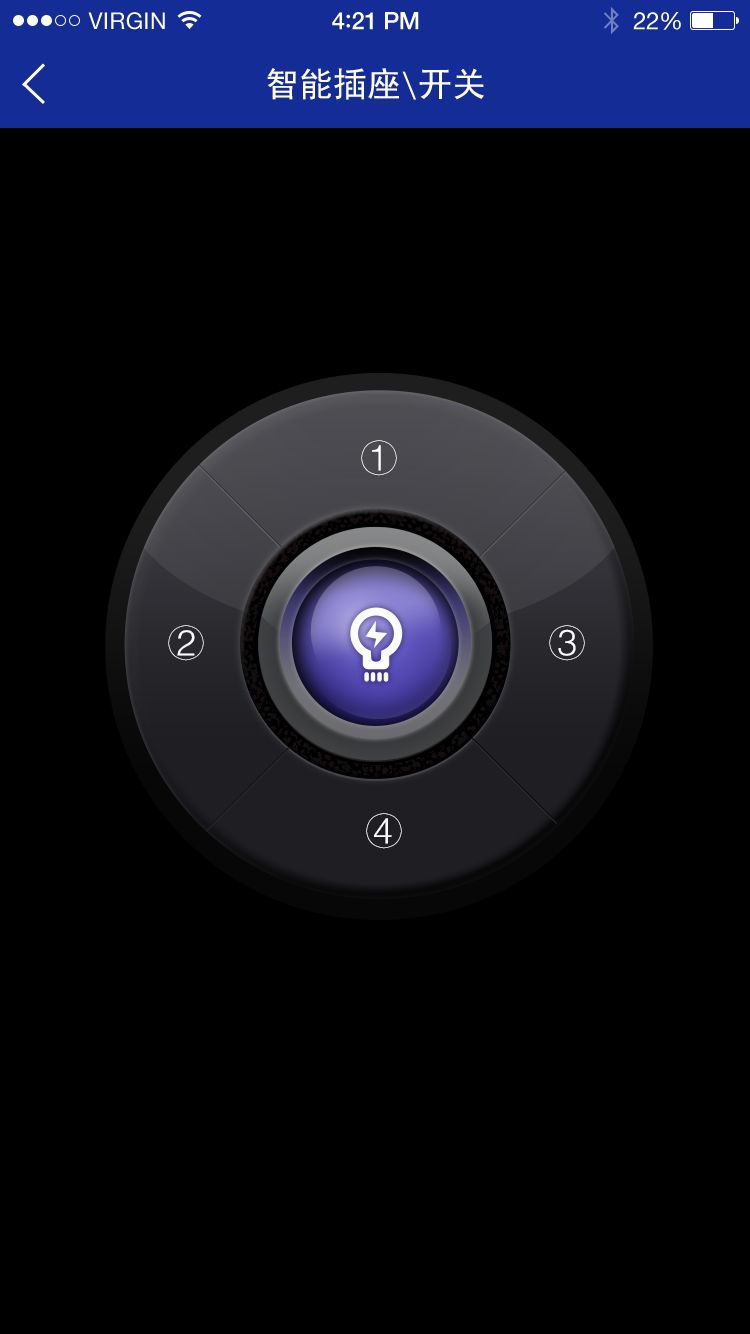
<style>
.page{position:relative;width:750px;height:1334px;background:#000000}
.page>*{position:absolute;margin:0}
.t1{font:34px "SimHei";color:#fefefe}
.t2{font:36px "FZY3JW--GB1-0";color:#ffffff}
</style>
<div class="page">
<p class="t1" style="left:267px;top:68px;width:217px;height:32px">智能插座\开关</p>
<p class="t2" style="left:361px;top:440px;width:36px;height:36px">①</p>
<p class="t2" style="left:168px;top:625px;width:36px;height:36px">②</p>
<p class="t2" style="left:549px;top:625px;width:36px;height:36px">③</p>
<p class="t2" style="left:366px;top:813px;width:36px;height:36px">④</p>
</div>
